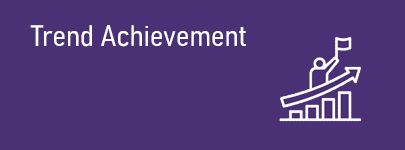
<style>
.page{position:relative;width:405px;height:150px;background:#4a3175}
.page>*{position:absolute;margin:0}
.t1{font:29.2px "Bahnschrift-SemiLightSemiCondensed";color:#ffffff}
</style>
<div class="page">
<p class="t1" style="left:30px;top:25px;width:216px;height:22px">Trend Achievement</p>
</div>
